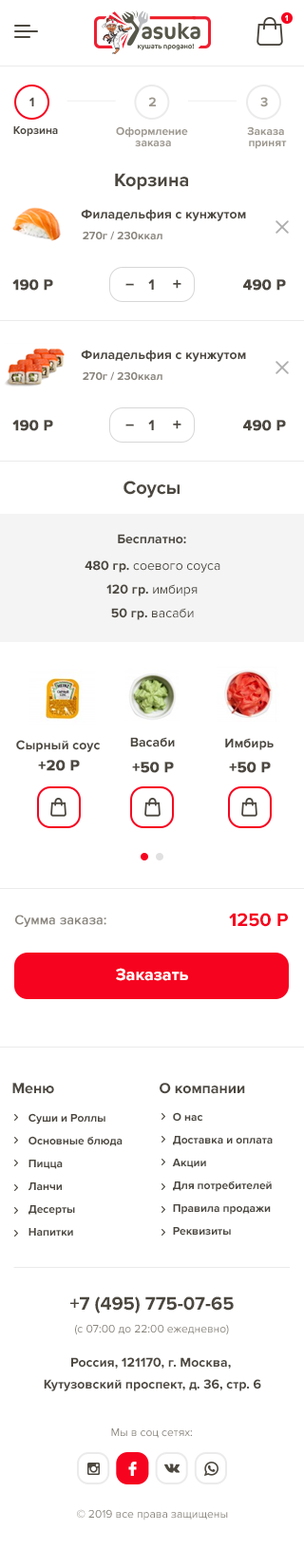
<style>
.page{position:relative;width:304px;height:1568px;background:#ffffff}
.page>*{position:absolute;margin:0}
.t1{font:8.6px "ProximaNova-Bold";color:#ffffff}
.t2{font:13.4px "ProximaNova-Bold";color:#4c4840}
.t3{font:13.4px "ProximaNova-Bold";color:#9d988f}
.t4{font:11.4px "ProximaNova-Bold";color:#4c4840}
.t5{font:11.4px/11.4px "ProximaNova-Bold";color:#9d988f}
.t6{font:19px "ProximaNova-Bold";color:#4c4840}
.t7{font:13.3px "ProximaNova-Bold";color:#4c4840}
.t8{font:11.4px "ProximaNova-Bold";color:#8a867e}
.t9{font:15.2px "ProximaNova-Bold";color:#4c4840;font-weight:bold}
.t10{font:15.2px "ProximaNova-Bold";color:#4c4840}
.t11{font:17.2px "ProximaNova-Extrabld";color:#4c4840}
.t12{font:17.2px "ProximaNova-Extrabld";color:#4c4840;scale:0.8 1}
.t13{font:13.3px "ProximaNova-Regular";color:#4c4840}
.t14{font:13.3px "ProximaNova-Regular";color:#8a867e;font-weight:bold}
.t15{font:19px "ProximaNova-Bold";color:#f6041f}
.t16{font:17.1px "ProximaNova-Bold";color:#ffffff}
.t17{font:11.4px/22.8px "ProximaNova-Bold";color:#4c4840}
.t18{font:11.4px "ProximaNova-Regular";color:#8a867e}
.t19{font:13.3px/21.8px "ProximaNova-Bold";color:#4c4840}
</style>
<div class="page">
<p class="t1" style="left:285px;top:15px;width:3px;height:6px">1</p>
<p class="t2" style="left:29px;top:97px;width:5px;height:9px">1</p>
<p class="t3" style="left:148px;top:97px;width:8px;height:9px">2</p>
<p class="t3" style="left:260px;top:97px;width:8px;height:10px">3</p>
<p class="t4" style="left:13px;top:126px;width:45px;height:11px">Корзина</p>
<p class="t5" style="left:116px;top:126px;width:72px;height:21px;text-align:center">Оформление <br>заказа</p>
<p class="t5" style="left:247px;top:127px;width:40px;height:22px;text-align:center">Заказа <br>принят</p>
<p class="t6" style="left:115px;top:173px;width:73px;height:17px">Корзина</p>
<p class="t7" style="left:81px;top:209px;width:165px;height:12px">Филадельфия с кунжутом</p>
<p class="t8" style="left:83px;top:231px;width:79px;height:9px">270г / 230ккал</p>
<p class="t9" style="left:12px;top:279px;width:41px;height:12px">190 P</p>
<p class="t10" style="left:148px;top:279px;width:6px;height:11px">1</p>
<p class="t11" style="left:173px;top:279px;width:8px;height:10px">+</p>
<p class="t9" style="left:243px;top:279px;width:43px;height:12px">490 P</p>
<p class="t12" style="left:125px;top:283px;width:9px;height:3px">_</p>
<p class="t7" style="left:81px;top:349px;width:165px;height:13px">Филадельфия с кунжутом</p>
<p class="t8" style="left:83px;top:371px;width:79px;height:10px">270г / 230ккал</p>
<p class="t9" style="left:12px;top:420px;width:41px;height:11px">190 P</p>
<p class="t12" style="left:125px;top:424px;width:9px;height:2px">_</p>
<p class="t10" style="left:148px;top:420px;width:6px;height:10px">1</p>
<p class="t11" style="left:173px;top:420px;width:8px;height:9px">+</p>
<p class="t9" style="left:243px;top:420px;width:43px;height:11px">490 P</p>
<p class="t6" style="left:123px;top:481px;width:56px;height:17px">Соусы</p>
<p class="t7" style="left:118px;top:534px;width:68px;height:10px">Бесплатно:</p>
<p class="t13" style="left:85px;top:560px;width:135px;height:13px"><span class="t7">480 гр. </span>соевого соуса</p>
<p class="t7" style="left:106px;top:584px;width:92px;height:12px">120 гр. <span class="t13">имбиря</span></p>
<p class="t7" style="left:111px;top:608px;width:83px;height:12px">50 гр. <span class="t13">васаби</span></p>
<p class="t7" style="left:130px;top:737px;width:45px;height:10px">Васаби</p>
<p class="t7" style="left:225px;top:738px;width:49px;height:12px">Имбирь</p>
<p class="t7" style="left:16px;top:740px;width:85px;height:12px">Сырный соус</p>
<p class="t9" style="left:38px;top:760px;width:42px;height:11px">+20 P</p>
<p class="t9" style="left:132px;top:762px;width:42px;height:11px">+50 P</p>
<p class="t9" style="left:229px;top:762px;width:42px;height:11px">+50 P</p>
<p class="t14" style="left:15px;top:915px;width:91px;height:12px">Сумма заказа:</p>
<p class="t15" style="left:229px;top:913px;width:59px;height:14px">1250 P</p>
<p class="t16" style="left:116px;top:968px;width:72px;height:13px">Заказать</p>
<p class="t10" style="left:12px;top:1083px;width:42px;height:11px">Меню</p>
<p class="t10" style="left:160px;top:1083px;width:85px;height:11px">О компании</p>
<p class="t17" style="left:28px;top:1113px;width:95px;height:124px">Суши и Роллы<br>Основные блюда<br>Пицца<br>Ланчи<br>Десерты<br>Напитки</p>
<p class="t17" style="left:172px;top:1112px;width:101px;height:124px">О нас<br>Доставка и оплата <br>Акции<br>Для потребителей<br>Правила продажи<br>Реквизиты</p>
<p class="t6" style="left:70px;top:1296px;width:164px;height:17px">+7 (495) 775-07-65</p>
<p class="t18" style="left:75px;top:1324px;width:154px;height:11px">(с 07:00 до 22:00 ежедневно)</p>
<p class="t19" style="left:44px;top:1357px;width:217px;height:34px;text-align:center">Россия, 121170, г. Москва, <br>Кутузовский проспект, д. 36, стр. 6</p>
<p class="t18" style="left:111px;top:1428px;width:81px;height:10px">Мы в соц сетях:</p>
<p class="t18" style="left:77px;top:1509px;width:151px;height:12px">© 2019 все права защищены</p>
</div>
